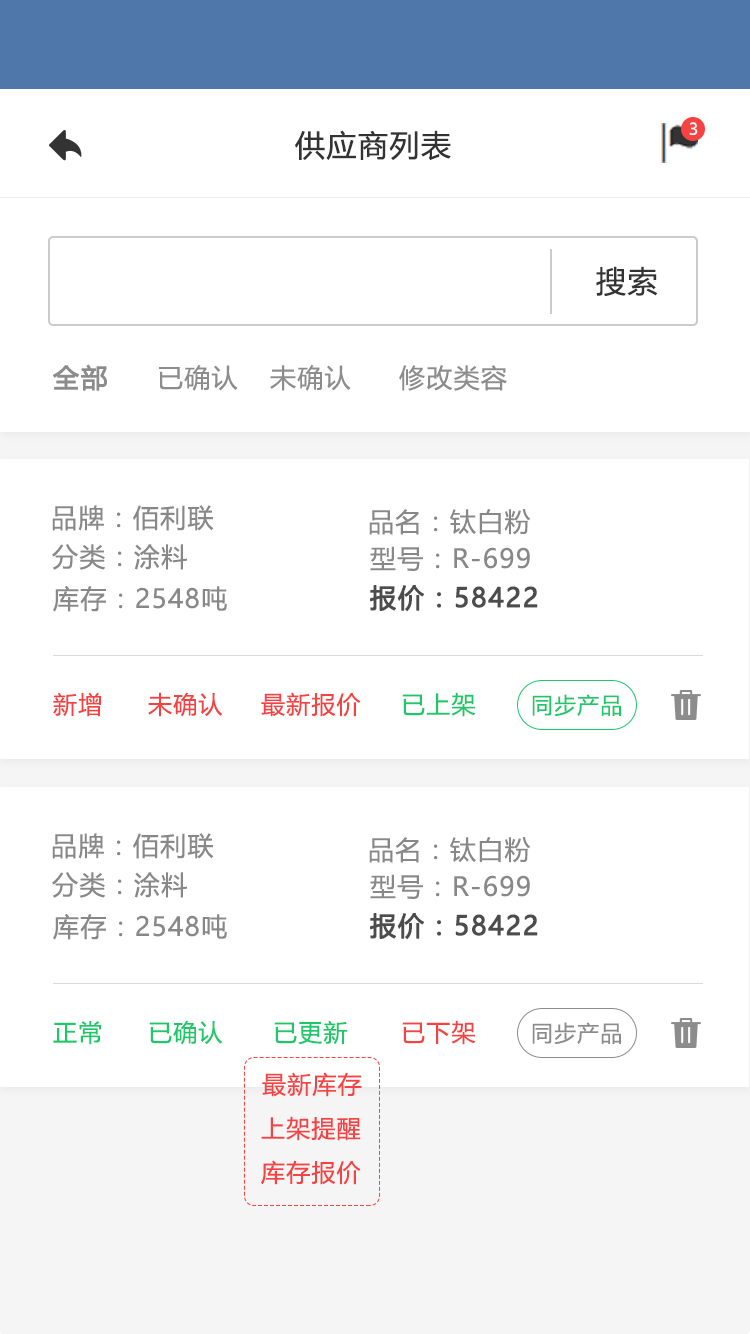
<style>
.page{position:relative;width:750px;height:1334px;background:#ffffff}
.page>*{position:absolute;margin:0}
.t1{font:16px "MicrosoftYaHeiUI";color:#ffffff}
.t2{font:30px "MicrosoftYaHeiUI";letter-spacing:0.05em;color:#333333}
.t3{font:26px "MicrosoftYaHeiUI";letter-spacing:0.05em;color:#8c8c8c;font-weight:bold}
.t4{font:26px "MicrosoftYaHeiUI";letter-spacing:0.05em;color:#8c8c8c}
.t5{font:26px "MicrosoftYaHeiUI";letter-spacing:0.05em;color:#888888}
.t6{font:26px "MicrosoftYaHeiUI";letter-spacing:0.05em;color:#4c4c4c;font-weight:bold}
.t7{font:24px "MicrosoftYaHeiUI";letter-spacing:0.05em;color:#f54343}
.t8{font:24px "MicrosoftYaHeiUI";letter-spacing:0.05em;color:#1dc869}
.t9{font:22px "MicrosoftYaHeiUI";letter-spacing:0.05em;color:#1dc869}
.t10{font:22px "MicrosoftYaHeiUI";letter-spacing:0.05em;color:#8c8c8c}
</style>
<div class="page">
<p class="t1" style="left:689px;top:122px;width:9px;height:13px">3</p>
<p class="t2" style="left:295px;top:130px;width:156px;height:31px">供应商列表</p>
<p class="t2" style="left:596px;top:266px;width:62px;height:30px">搜索</p>
<p class="t3" style="left:53px;top:364px;width:54px;height:27px">全部</p>
<p class="t4" style="left:159px;top:365px;width:79px;height:26px">已确认</p>
<p class="t4" style="left:270px;top:365px;width:81px;height:26px">未确认</p>
<p class="t4" style="left:399px;top:365px;width:108px;height:26px">修改类容</p>
<p class="t5" style="left:52px;top:505px;width:162px;height:26px">品牌：佰利联</p>
<p class="t5" style="left:369px;top:509px;width:162px;height:26px">品名：钛白粉</p>
<p class="t5" style="left:52px;top:544px;width:135px;height:26px">分类：涂料</p>
<p class="t5" style="left:370px;top:546px;width:160px;height:25px">型号：R-699</p>
<p class="t5" style="left:53px;top:585px;width:174px;height:27px">库存：2548吨</p>
<p class="t6" style="left:370px;top:585px;width:168px;height:27px">报价：58422</p>
<p class="t7" style="left:53px;top:692px;width:48px;height:25px">新增</p>
<p class="t7" style="left:148px;top:692px;width:75px;height:25px">未确认</p>
<p class="t7" style="left:261px;top:692px;width:100px;height:25px">最新报价</p>
<p class="t8" style="left:402px;top:692px;width:74px;height:25px">已上架</p>
<p class="t9" style="left:532px;top:694px;width:89px;height:22px">同步产品</p>
<p class="t5" style="left:52px;top:833px;width:162px;height:26px">品牌：佰利联</p>
<p class="t5" style="left:369px;top:837px;width:162px;height:26px">品名：钛白粉</p>
<p class="t5" style="left:52px;top:872px;width:135px;height:26px">分类：涂料</p>
<p class="t5" style="left:370px;top:874px;width:160px;height:25px">型号：R-699</p>
<p class="t5" style="left:53px;top:913px;width:174px;height:27px">库存：2548吨</p>
<p class="t6" style="left:370px;top:913px;width:168px;height:27px">报价：58422</p>
<p class="t8" style="left:53px;top:1021px;width:48px;height:24px">正常</p>
<p class="t8" style="left:149px;top:1020px;width:74px;height:25px">已确认</p>
<p class="t8" style="left:274px;top:1020px;width:74px;height:25px">已更新</p>
<p class="t7" style="left:402px;top:1020px;width:74px;height:25px">已下架</p>
<p class="t10" style="left:532px;top:1022px;width:89px;height:22px">同步产品</p>
<p class="t7" style="left:262px;top:1072px;width:100px;height:25px">最新库存</p>
<p class="t7" style="left:261px;top:1116px;width:100px;height:25px">上架提醒</p>
<p class="t7" style="left:261px;top:1160px;width:100px;height:25px">库存报价</p>
</div>
